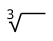
<style>
.page{position:relative;width:53px;height:41px;background:#ffffff}
.page>*{position:absolute;margin:0}
.t1{font:13.4px "DroidSans";color:#000000}
</style>
<div class="page">
<p class="t1" style="left:7px;top:9px;width:7px;height:11px">3</p>
</div>
